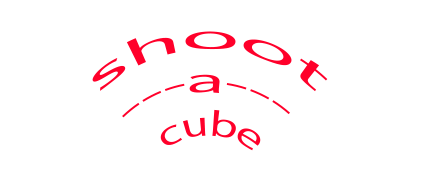
<style>
.page{position:relative;width:421px;height:180px;background:#ffffff}
.page>*{position:absolute;margin:0}
.t1{font:36px "MyriadPro-Regular";color:#ff002a}
</style>
<div class="page">
<p class="t1" style="left:92px;top:31px;width:236px;height:120px">shoot<br>---a---<br> cube</p>
</div>
